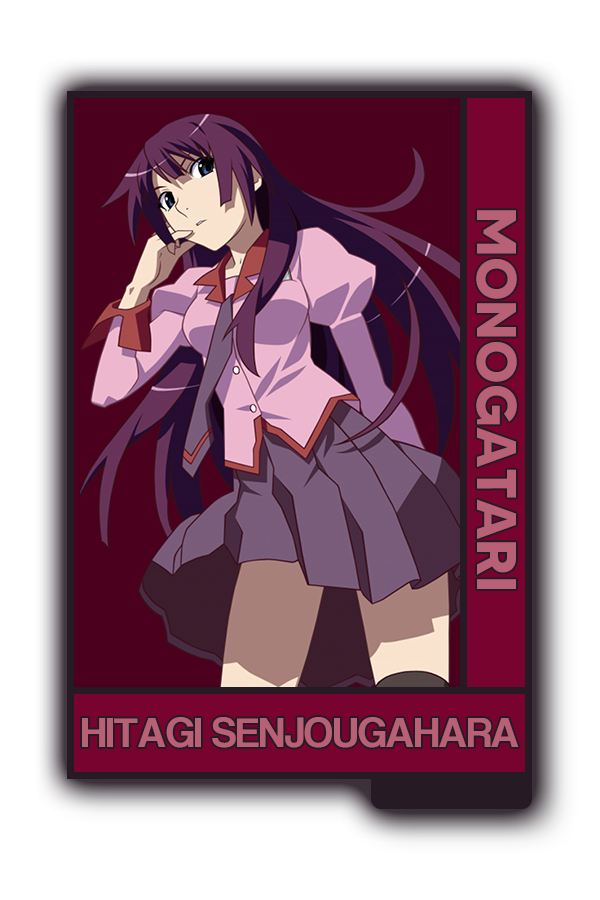
<style>
.page{position:relative;width:600px;height:900px;background:#ffffff}
.page>*{position:absolute;margin:0}
.t1{font:55.8px "MADETOMMY-Bold";color:#b86076}
.t2{font:42.9px "CoolveticaRg-Regular";color:#b86076}
</style>
<div class="page">
<p class="t1" style="left:476px;top:210px;width:41px;height:379px;rotate:90deg">MONOGATARI</p>
<p class="t2" style="left:82px;top:717px;width:437px;height:31px">HITAGI SENJOUGAHARA</p>
</div>
